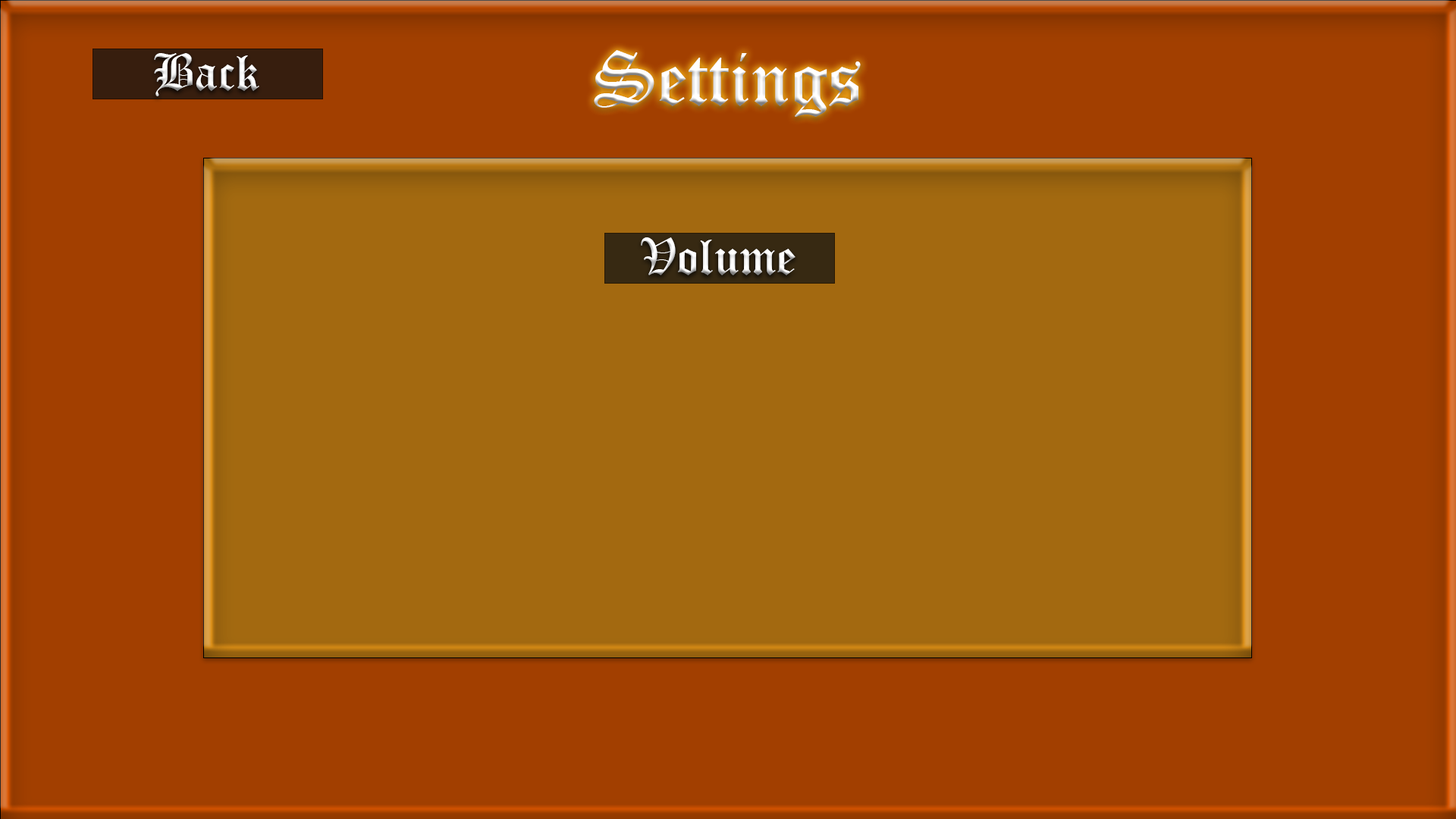
<style>
.page{position:relative;width:1456px;height:819px;background:#a23f00}
.page>*{position:absolute;margin:0}
.t1{font:50.6px "OldEnglishTextMT";color:#ffffff}
.t2{font:75.8px "OldEnglishTextMT"}
</style>
<div class="page">
<p class="t1" style="left:154px;top:53px;width:105px;height:43px">Back</p>
<p class="t2" style="left:594px;top:50px;width:267px;height:68px">Settings</p>
<p class="t1" style="left:641px;top:237px;width:154px;height:38px">Volume</p>
</div>
